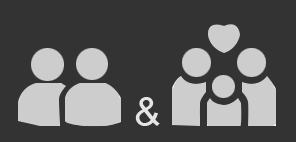
<style>
.page{position:relative;width:296px;height:142px;background:#333333}
.page>*{position:absolute;margin:0}
.t1{font:40px "ArialMT";color:#e5e5e5}
</style>
<div class="page">
<p class="t1" style="left:135px;top:97px;width:25px;height:29px">&amp;</p>
</div>
